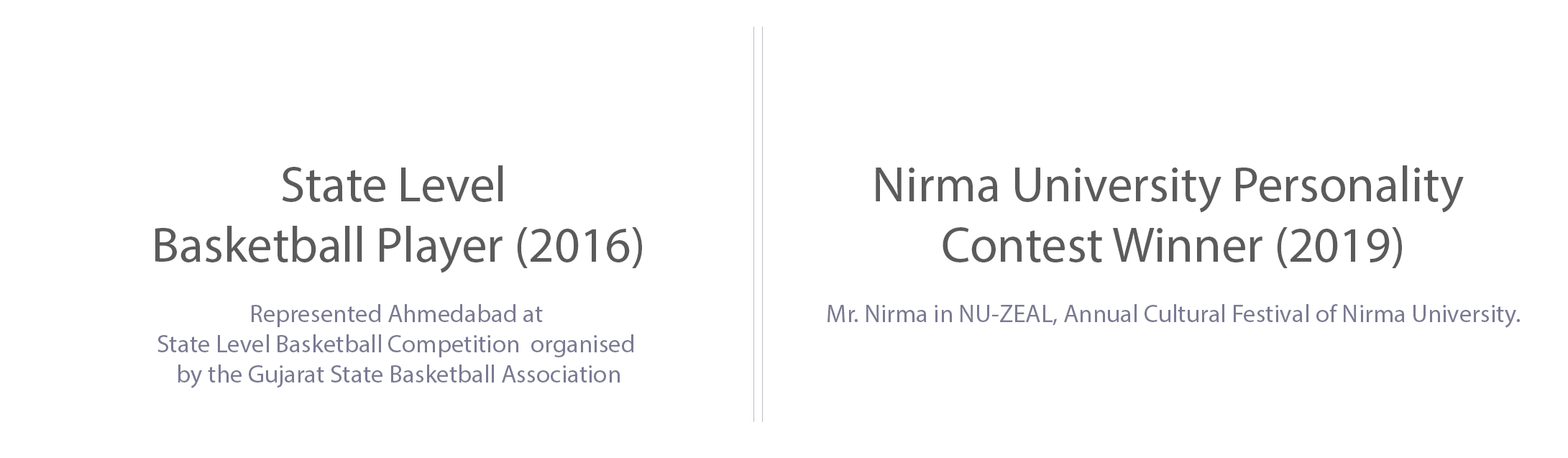
<style>
.page{position:relative;width:1568px;height:458px;background:#ffffff}
.page>*{position:absolute;margin:0}
.t1{font:25.2px "MyriadPro-Regular";color:#7a7a93}
.t2{font:50.3px "MyriadPro-Regular";color:#5b5b5b}
</style>
<div class="page">
<p class="t1" style="left:155px;top:165px;width:487px;height:223px;text-align:center"><span class="t2">State Level <br>Basketball Player (2016)<br><br></span>Represented Ahmedabad at <br>State Level Basketball Competition  organised <br>by the Gujarat State Basketball Association</p>
<p class="t1" style="left:827px;top:165px;width:693px;height:163px;text-align:center"><span class="t2">Nirma University Personality <br>Contest Winner (2019)<br><br></span>Mr. Nirma in NU-ZEAL, Annual Cultural Festival of Nirma University.</p>
</div>
